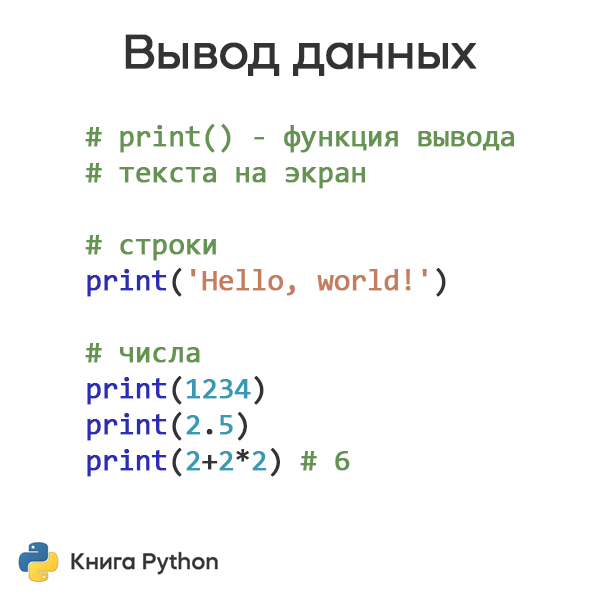
<style>
.page{position:relative;width:600px;height:600px;background:#ffffff}
.page>*{position:absolute;margin:0}
.t1{font:48px "MazzardH-Regular";letter-spacing:-0.025em;color:#333333;font-weight:bold}
.t2{font:30px "Consolas";letter-spacing:-0.025em;color:#659351;font-weight:bold}
.t3{font:30px "Consolas";letter-spacing:-0.025em;color:#2c2db7;font-weight:bold}
.t4{font:30px "Consolas";letter-spacing:-0.025em;color:#333333;font-weight:bold}
.t5{font:30px "Consolas";letter-spacing:-0.025em;color:#c37e60;font-weight:bold}
.t6{font:30px "Consolas";letter-spacing:-0.025em;color:#3999b5;font-weight:bold}
</style>
<div class="page">
<p class="t1" style="left:125px;top:34px;width:352px;height:42px">Вывод данных</p>
<p class="t2" style="left:85px;top:124px;width:429px;height:353px"># print() - функция вывода<br># текста на экран<br><br># строки<br><span class="t3">print</span><span class="t4">(</span><span class="t5">'Hello, world!'</span><span class="t4">)<br><br></span># числа<br><span class="t3">print</span><span class="t4">(</span><span class="t6">1234</span><span class="t4">)<br></span><span class="t3">print</span><span class="t4">(</span><span class="t6">2</span><span class="t4">.</span><span class="t6">5</span><span class="t4">)<br></span><span class="t3">print</span><span class="t4">(</span><span class="t6">2</span><span class="t4">+</span><span class="t6">2</span><span class="t4">*</span><span class="t6">2</span><span class="t4">) </span># 6</p>
</div>
